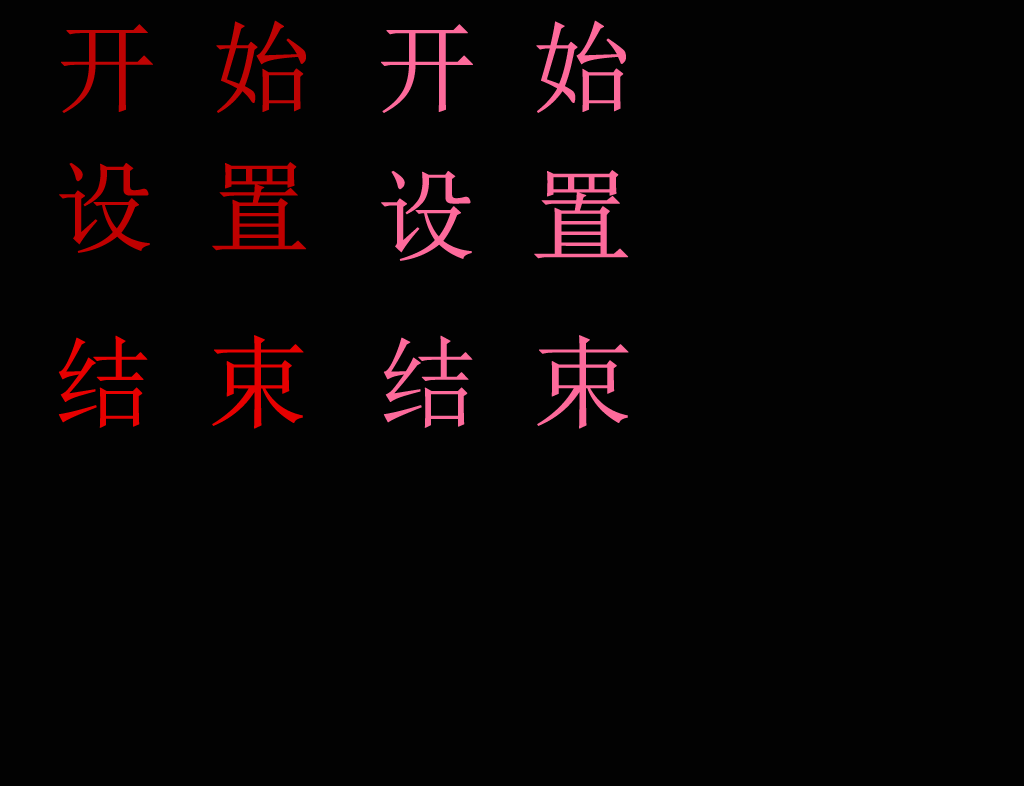
<style>
.page{position:relative;width:1024px;height:786px;background:#020202}
.page>*{position:absolute;margin:0}
.t1{font:100px "SimSun";color:#be0303;font-weight:bold}
.t2{font:100px "SimSun";color:#fd6a9b;font-weight:bold}
.t3{font:100px "SimSun";color:#bf0000;font-weight:bold}
.t4{font:100px "SimSun";color:#e70000;font-weight:bold}
</style>
<div class="page">
<p class="t1" style="left:61px;top:20px;width:245px;height:93px">开 始</p>
<p class="t2" style="left:381px;top:20px;width:245px;height:93px">开 始</p>
<p class="t3" style="left:59px;top:162px;width:248px;height:91px">设 置</p>
<p class="t2" style="left:381px;top:170px;width:248px;height:91px">设 置</p>
<p class="t4" style="left:58px;top:335px;width:246px;height:94px">结 束</p>
<p class="t2" style="left:383px;top:335px;width:246px;height:94px">结 束</p>
</div>
